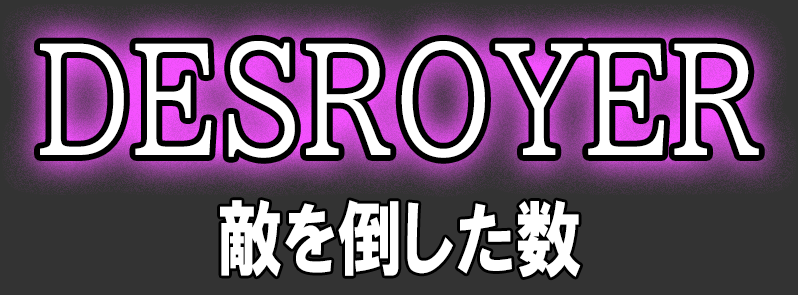
<style>
.page{position:relative;width:798px;height:295px;background:#333333}
.page>*{position:absolute;margin:0}
.t1{font:145px "BIZ-UDPMincho-Medium";color:#ffffff;font-weight:bold;scale:0.8 1}
.t2{font:82.9px "HGPSoeiKakugothicUB";color:#ffffff;scale:0.8 1}
</style>
<div class="page">
<p class="t1" style="left:40px;top:41px;width:719px;height:117px">DESROYER</p>
<p class="t2" style="left:220px;top:200px;width:361px;height:78px">敵を倒した数</p>
</div>
